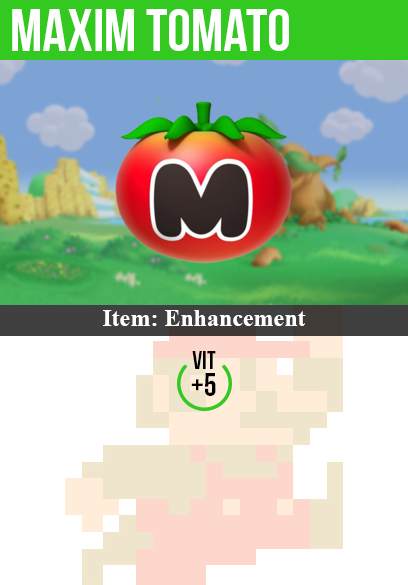
<style>
.page{position:relative;width:408px;height:585px;background:#ffffff}
.page>*{position:absolute;margin:0}
.t1{font:60px "BebasNeue";color:#ffffff}
.t2{font:24px "TimesNewRomanPS-BoldMT";color:#ffffff}
.t3{font:25px "BebasNeue";color:#000000}
.t4{font:32px "BebasNeue";color:#000000}
</style>
<div class="page">
<p class="t1" style="left:12px;top:9px;width:277px;height:42px">maxim tomato</p>
<p class="t2" style="left:103px;top:310px;width:203px;height:16px">Item: Enhancement</p>
<p class="t3" style="left:192px;top:351px;width:24px;height:18px">vit</p>
<p class="t4" style="left:191px;top:373px;width:25px;height:23px">+5</p>
</div>
